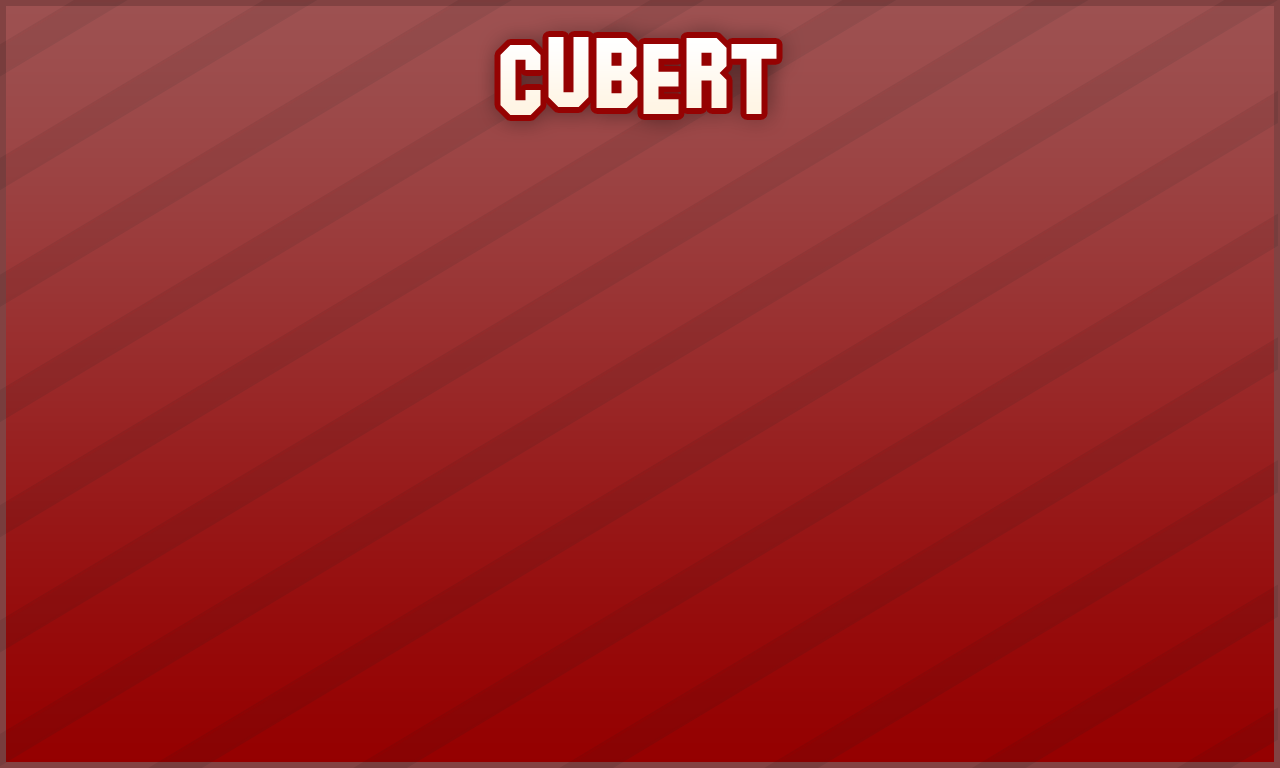
<style>
.page{position:relative;width:1280px;height:768px}
.page>*{position:absolute;margin:0}
.t1{font:100px "HollywoodHills";color:#fffaf2}
</style>
<div class="page">
<p class="t1" style="left:500px;top:37px;width:277px;height:78px">CUBERT</p>
</div>
